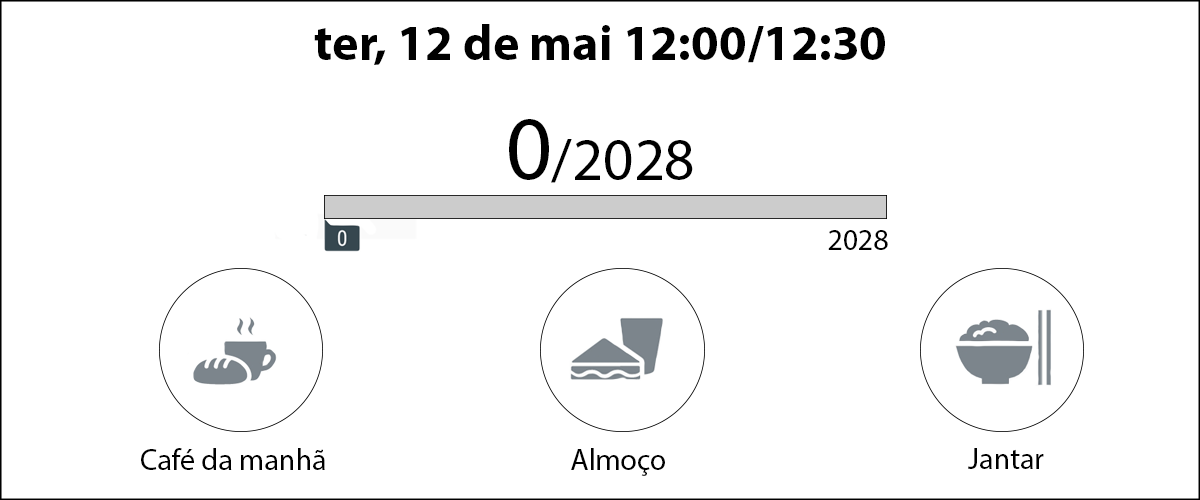
<style>
.page{position:relative;width:1200px;height:500px;background:#ffffff}
.page>*{position:absolute;margin:0}
.t1{font:50px "MyriadPro-Bold";color:#000000}
.t2{font:60px "MyriadPro-Regular";color:#000000}
.t3{font:30px "MyriadPro-Regular";color:#000000}
</style>
<div class="page">
<p class="t1" style="left:314px;top:24px;width:571px;height:41px">ter, 12 de mai 12:00/12:30</p>
<p class="t2" style="left:551px;top:139px;width:142px;height:44px">/2028</p>
<p class="t3" style="left:828px;top:230px;width:60px;height:20px">2028</p>
<p class="t3" style="left:141px;top:448px;width:184px;height:22px">Café da manhã</p>
<p class="t3" style="left:571px;top:448px;width:94px;height:28px">Almoço</p>
<p class="t3" style="left:968px;top:448px;width:76px;height:21px">Jantar</p>
</div>
